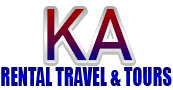
<style>
.page{position:relative;width:173px;height:90px;background:#ffffff}
.page>*{position:absolute;margin:0}
.t1{font:72px "Bahnschrift"}
.t2{font:24px "Impact";scale:0.77 1}
</style>
<div class="page">
<p class="t1" style="left:47px;top:11px;width:86px;height:51px">KA</p>
<p class="t1" style="left:47px;top:9px;width:86px;height:51px">KA</p>
<p class="t2" style="left:1px;top:67px;width:171px;height:19px">RENTAL TRAVEL &amp; TOURS</p>
</div>
